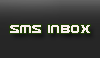
<style>
.page{position:relative;width:100px;height:58px;background:#262626}
.page>*{position:absolute;margin:0}
.t1{font:13px "Usuzi";color:#f8eded}
</style>
<div class="page">
<p class="t1" style="left:10px;top:25px;width:80px;height:8px">SMS inbox</p>
</div>
